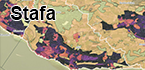
<style>
.page{position:relative;width:145px;height:70px}
.page>*{position:absolute;margin:0}
.t1{font:18.7px "Arial-BoldMT";color:#000000}
</style>
<div class="page">
<p class="t1" style="left:10px;top:6px;width:46px;height:14px">Stafa</p>
</div>
